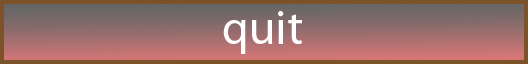
<style>
.page{position:relative;width:528px;height:64px}
.page>*{position:absolute;margin:0}
.t1{font:48px "MyriadPro-Regular";color:#ffffff}
</style>
<div class="page">
<p class="t1" style="left:223px;top:11px;width:79px;height:43px">quit</p>
</div>
